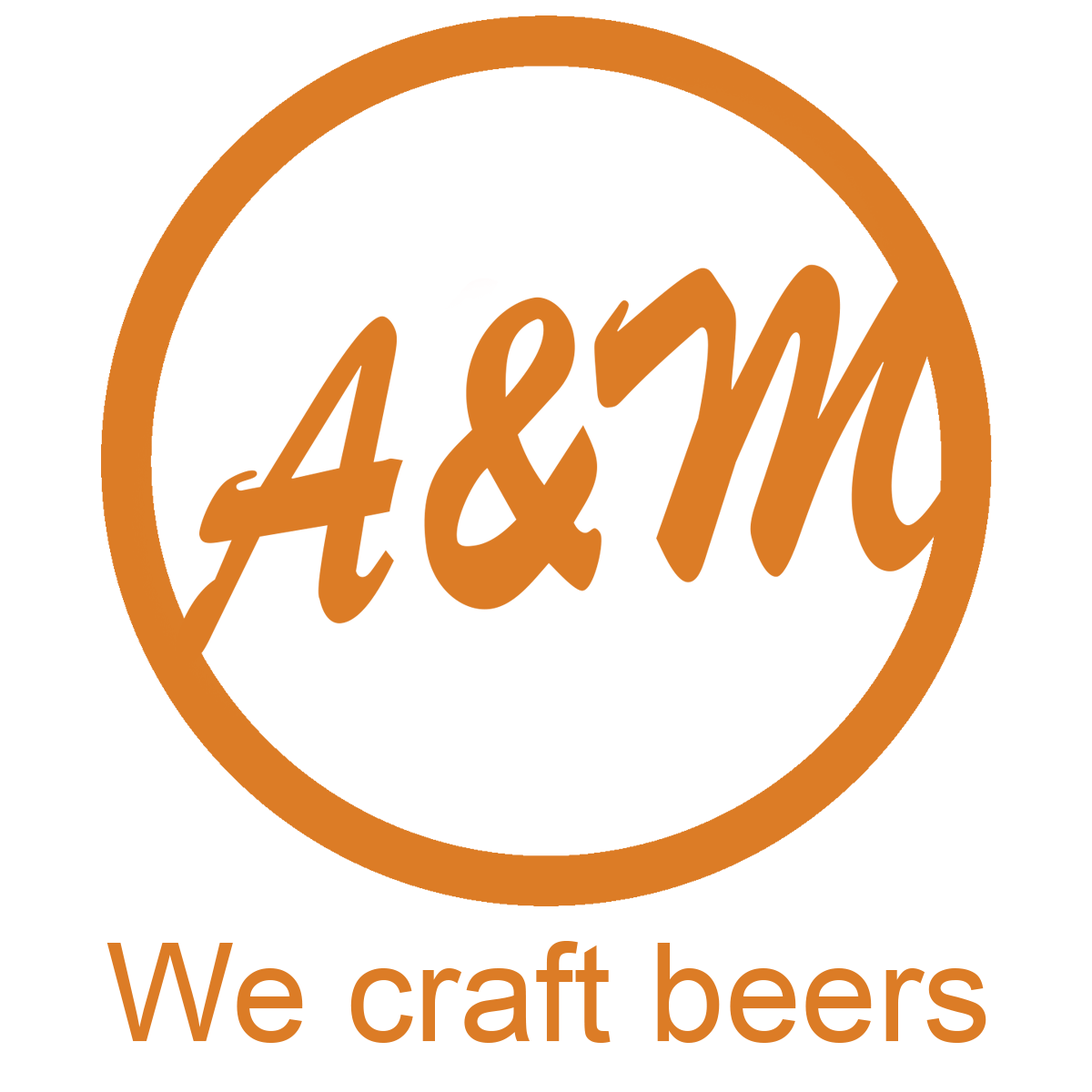
<style>
.page{position:relative;width:1092px;height:1092px;background:#ffffff}
.page>*{position:absolute;margin:0}
.t1{font:136.5px "ArialMT";color:#dc7c26}
</style>
<div class="page">
<p class="t1" style="left:106px;top:941px;width:880px;height:102px">We craft beers</p>
</div>
